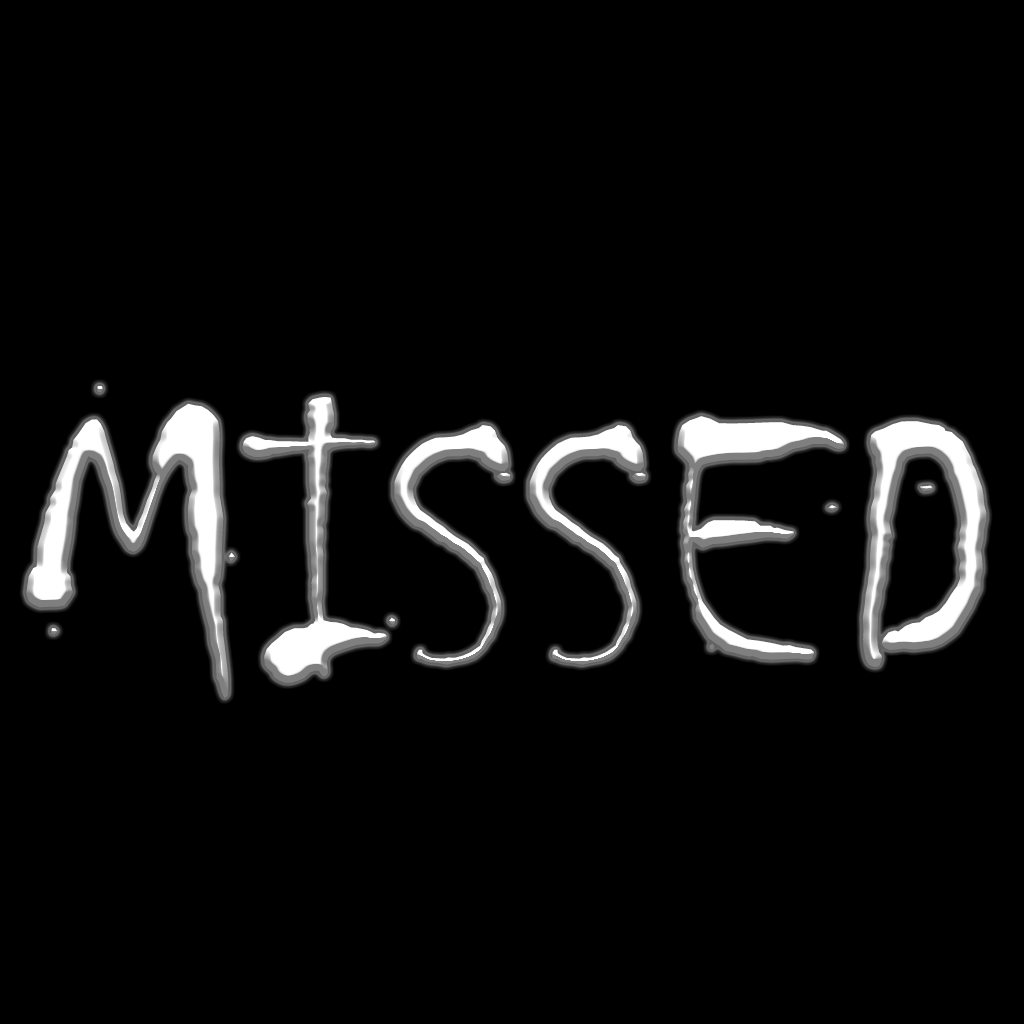
<style>
.page{position:relative;width:1024px;height:1024px;background:#000000}
.page>*{position:absolute;margin:0}
.t1{font:404px "Chiller-Regular"}
</style>
<div class="page">
<p class="t1" style="left:26px;top:386px;width:961px;height:313px">MISSED</p>
</div>
